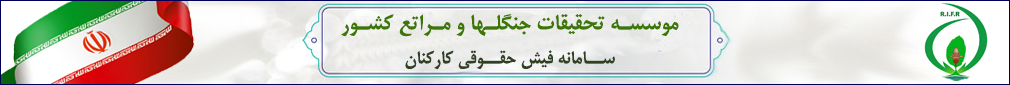
<style>
.page{position:relative;width:1010px;height:85px}
.page>*{position:absolute;margin:0}
.t1{font:23px "BMitraBold";color:#3b7702}
.t2{font:19.4px/34px "BMitraBold";color:#314022}
</style>
<div class="page">
<p class="t1" style="left:341px;top:14px;width:338px;height:56px;text-align:center">موسسـه تحقیقات جنگلـها و مـراتع کشـور<br><span class="t2">ســامانه فیش حقــوقی کارکنان</span></p>
</div>
